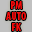
<style>
.page{position:relative;width:32px;height:32px;background:#c1c1c1}
.page>*{position:absolute;margin:0}
.t1{font:11px/11px "MyriadPro-BoldCond";color:#f60b0b}
</style>
<div class="page">
<p class="t1" style="left:6px;top:1px;width:20px;height:30px;text-align:center">PM<br>AUTO<br>FK</p>
</div>
